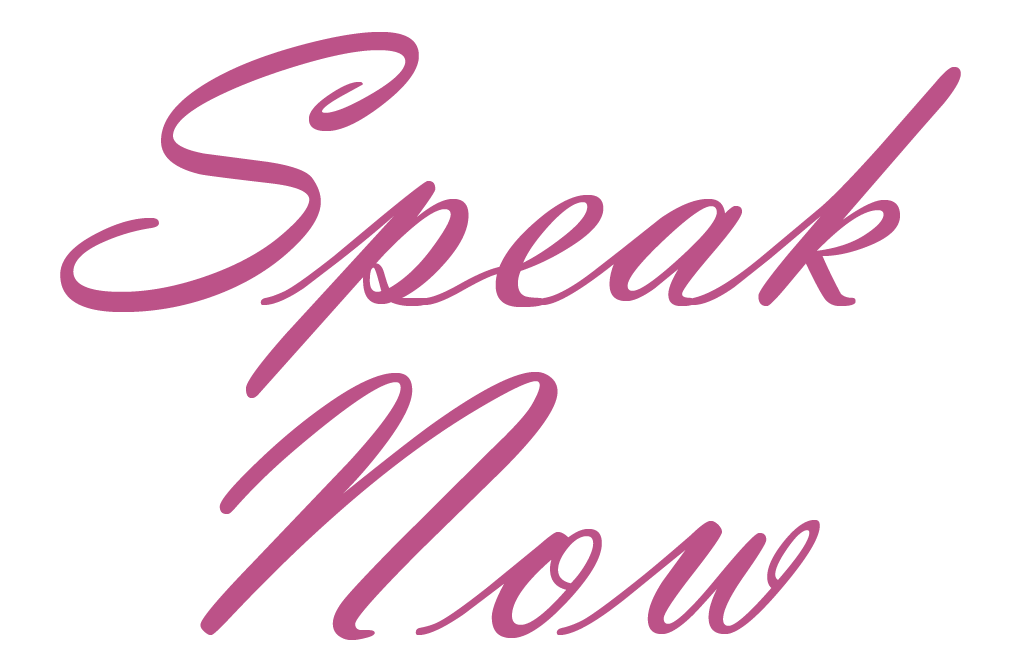
<style>
.page{position:relative;width:1024px;height:665px;background:#ffffff}
.page>*{position:absolute;margin:0}
.t1{font:400px "VladimirScript";color:#bc5288}
</style>
<div class="page">
<p class="t1" style="left:60px;top:32px;width:901px;height:366px">Speak</p>
<p class="t1" style="left:200px;top:372px;width:620px;height:268px">Now</p>
</div>
